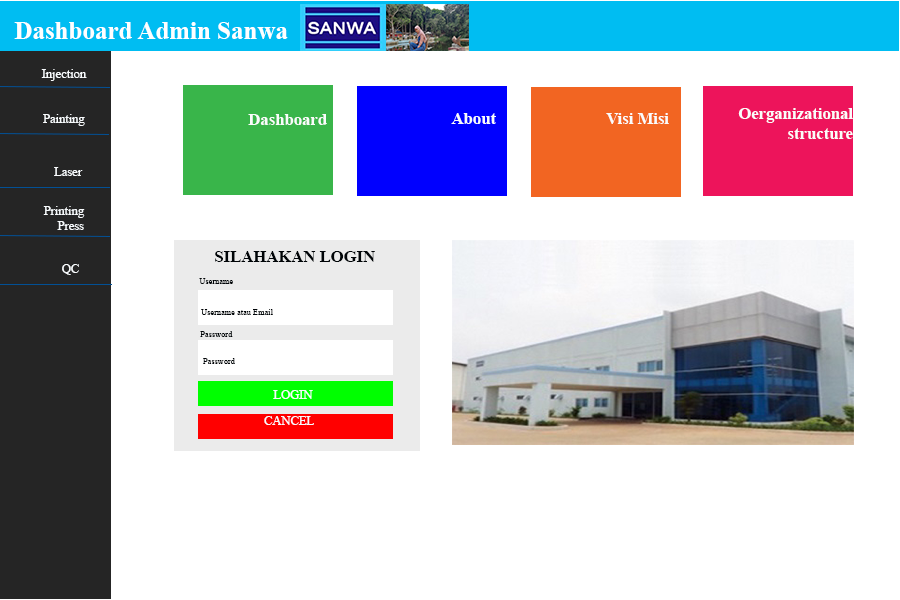
<style>
.page{position:relative;width:900px;height:600px;background:#ffffff}
.page>*{position:absolute;margin:0}
.t1{font:25px "TimesNewRomanPS-BoldMT";color:#ffffff}
.t2{font:12.5px "TimesNewRomanPSMT";color:#f8fbfd}
.t3{font:16.7px "TimesNewRomanPS-BoldMT";color:#fafcfb}
.t4{font:16.7px "TimesNewRomanPS-BoldMT";color:#000407}
.t5{font:8.3px "TimesNewRomanPSMT";color:#000407}
</style>
<div class="page">
<p class="t1" style="left:14px;top:22px;width:274px;height:17px">Dashboard Admin Sanwa</p>
<p class="t2" style="left:41px;top:69px;width:46px;height:12px">Injection</p>
<p class="t3" style="left:451px;top:113px;width:45px;height:11px">About</p>
<p class="t3" style="left:606px;top:113px;width:63px;height:11px">Visi Misi</p>
<p class="t3" style="left:738px;top:108px;width:115px;height:31px">Oerganizational structure</p>
<p class="t2" style="left:43px;top:114px;width:42px;height:12px">Painting</p>
<p class="t3" style="left:248px;top:114px;width:79px;height:11px">Dashboard</p>
<p class="t2" style="left:54px;top:167px;width:29px;height:9px">Laser</p>
<p class="t2" style="left:43px;top:206px;width:42px;height:24px">Printing<br>Press</p>
<p class="t4" style="left:215px;top:251px;width:160px;height:11px">SILAHAKAN LOGIN</p>
<p class="t2" style="left:62px;top:264px;width:17px;height:11px">QC</p>
<p class="t5" style="left:199px;top:278px;width:34px;height:6px">Username</p>
<p class="t5" style="left:201px;top:309px;width:72px;height:6px">Username atau Email</p>
<p class="t5" style="left:200px;top:331px;width:33px;height:6px">Password</p>
<p class="t5" style="left:203px;top:358px;width:32px;height:6px">Password</p>
<p class="t2" style="left:273px;top:390px;width:40px;height:9px">LOGIN</p>
<p class="t2" style="left:264px;top:416px;width:50px;height:9px">CANCEL</p>
</div>
